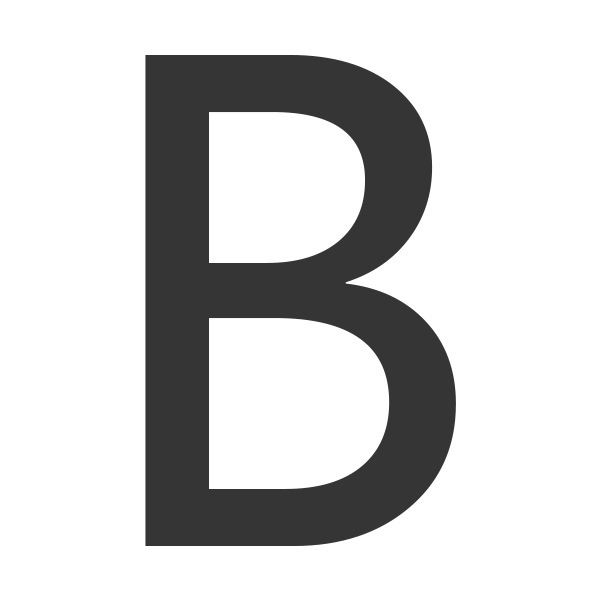
<style>
.page{position:relative;width:600px;height:600px;background:#ffffff}
.page>*{position:absolute;margin:0}
.t1{font:650px "MicrosoftYaHei";color:#353535}
</style>
<div class="page">
<p class="t1" style="left:145px;top:55px;width:311px;height:491px">B</p>
</div>
